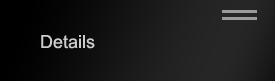
<style>
.page{position:relative;width:275px;height:81px}
.page>*{position:absolute;margin:0}
.t1{font:18px "ArialMT";color:#cccccc}
</style>
<div class="page">
<p class="t1" style="left:41px;top:35px;width:54px;height:14px">Details</p>
</div>
